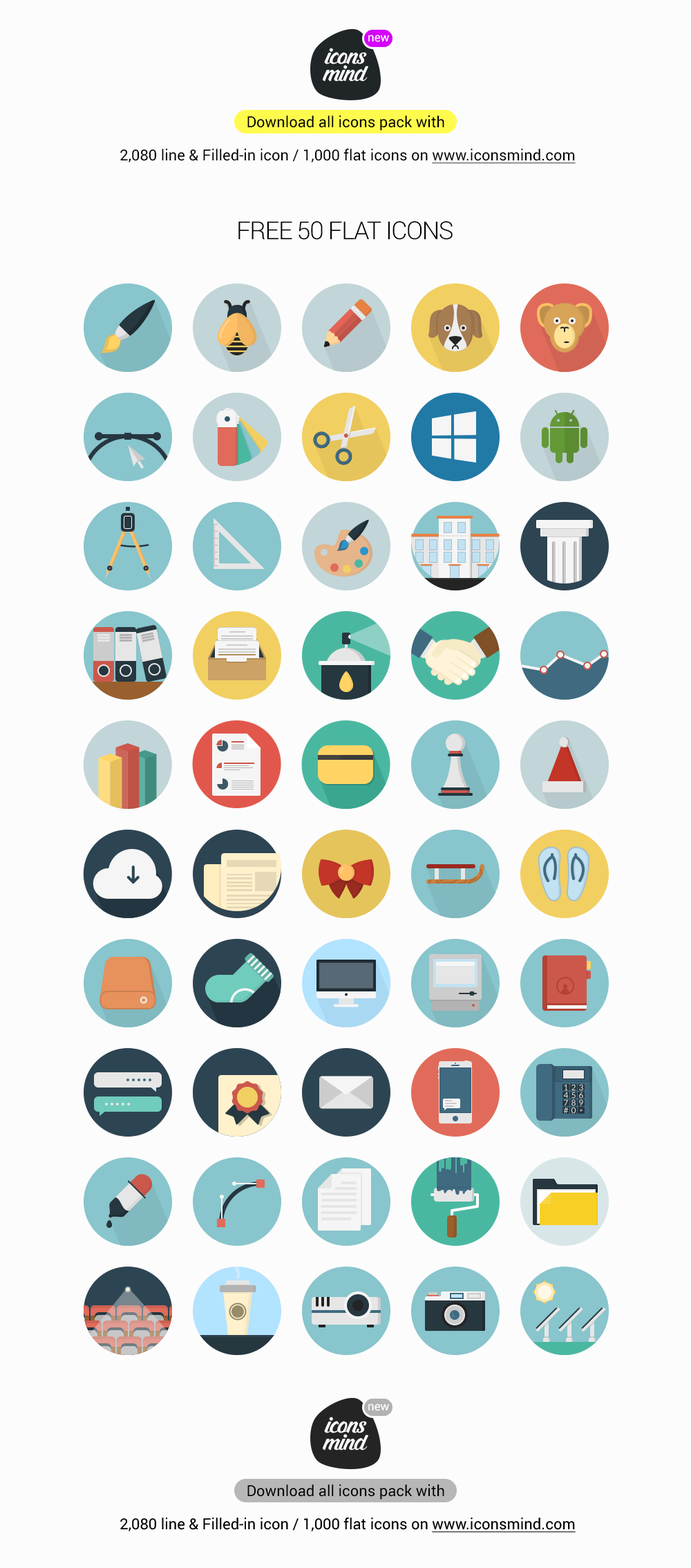
<style>
.page{position:relative;width:691px;height:1568px;background:#fcfcfc}
.page>*{position:absolute;margin:0}
.t1{font:11.8px "Roboto-Regular";color:#ffffff}
.t2{font:15.2px/33.2px "Roboto-Regular";color:#000000}
.t3{font:15.2px/33.2px "Roboto-Regular";color:#000000;text-decoration:underline}
.t4{font:24.9px "Roboto-Light";letter-spacing:-0.04em;color:#000000;text-transform:uppercase}
</style>
<div class="page">
<p class="t1" style="left:368px;top:35px;width:21px;height:7px">new</p>
<p class="t2" style="left:120px;top:115px;width:456px;height:49px;text-align:center">Download all icons pack with <br>2,080 line &amp; Filled-in icon / 1,000 flat icons on <span class="t3">www.iconsmind.com</span></p>
<p class="t4" style="left:239px;top:221px;width:214px;height:19px">Free 50 flat icons</p>
</div>
